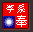
<style>
.page{position:relative;width:33px;height:32px;background:#f20000}
.page>*{position:absolute;margin:0}
.t1{font:10.4px "SimSun";color:#ffffff}
.t2{font:11.7px "SimSun";color:#ffffff}
</style>
<div class="page">
<p class="t1" style="left:6px;top:4px;width:19px;height:9px">李系</p>
<p class="t2" style="left:16px;top:15px;width:11px;height:12px">奉</p>
</div>
